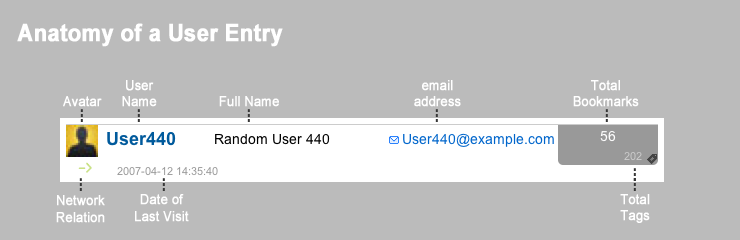
<style>
.page{position:relative;width:740px;height:240px;background:#bbbbbb}
.page>*{position:absolute;margin:0}
.t1{font:24px "Arial-BoldMT";color:#ffffff;font-weight:bold;scale:0.9 1}
.t2{font:14px "ArialMT";color:#ffffff;font-weight:bold;scale:0.9 1}
</style>
<div class="page">
<p class="t1" style="left:17px;top:23px;width:266px;height:24px">Anatomy of a User Entry</p>
<p class="t2" style="left:122px;top:80px;width:35px;height:27px;text-align:center">User<br>Name</p>
<p class="t2" style="left:414px;top:80px;width:47px;height:27px;text-align:center">email<br>address</p>
<p class="t2" style="left:573px;top:80px;width:66px;height:27px;text-align:center">Total<br>Bookmarks</p>
<p class="t2" style="left:63px;top:96px;width:39px;height:11px">Avatar</p>
<p class="t2" style="left:219px;top:96px;width:60px;height:11px">Full Name</p>
<p class="t2" style="left:56px;top:195px;width:49px;height:28px;text-align:center">Network<br>Relation</p>
<p class="t2" style="left:135px;top:194px;width:54px;height:28px;text-align:center">Date of<br>Last Visit</p>
<p class="t2" style="left:620px;top:194px;width:30px;height:29px;text-align:center">Total<br>Tags</p>
</div>
